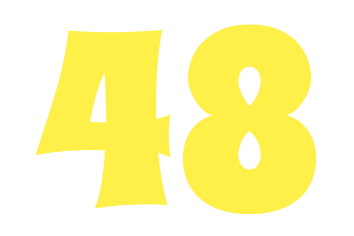
<style>
.page{position:relative;width:354px;height:236px;background:#ffffff}
.page>*{position:absolute;margin:0}
.t1{font:250px "SpicyRice-Regular";color:#ffef49}
</style>
<div class="page">
<p class="t1" style="left:35px;top:24px;width:282px;height:191px">48</p>
</div>
